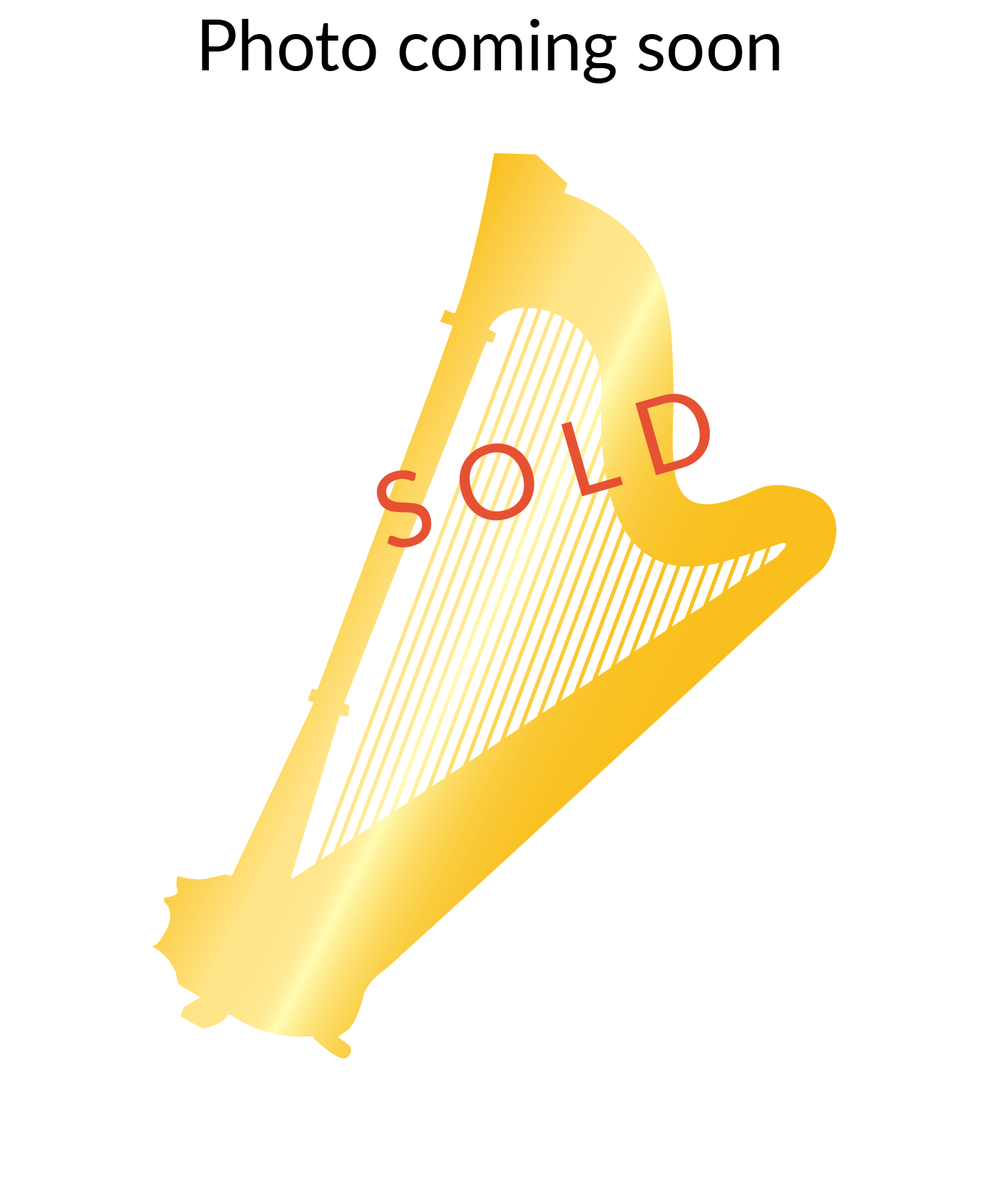
<style>
.page{position:relative;width:992px;height:1201px;background:#ffffff}
.page>*{position:absolute;margin:0}
.t1{font:69.6px "Lato-Regular";color:#000000}
.t2{font:104.5px "Lato-Regular";color:#e65133}
</style>
<div class="page">
<p class="t1" style="left:202px;top:19px;width:578px;height:64px">Photo coming soon</p>
<p class="t2" style="left:377px;top:394px;width:333px;height:154px;rotate:-16deg">S O L D</p>
</div>
